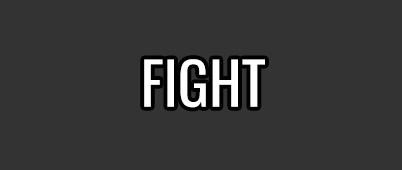
<style>
.page{position:relative;width:402px;height:170px;background:#333333}
.page>*{position:absolute;margin:0}
.t1{font:58.3px "Oswald-Regular";color:#ffffff}
</style>
<div class="page">
<p class="t1" style="left:144px;top:59px;width:121px;height:49px">FIGHT</p>
</div>
